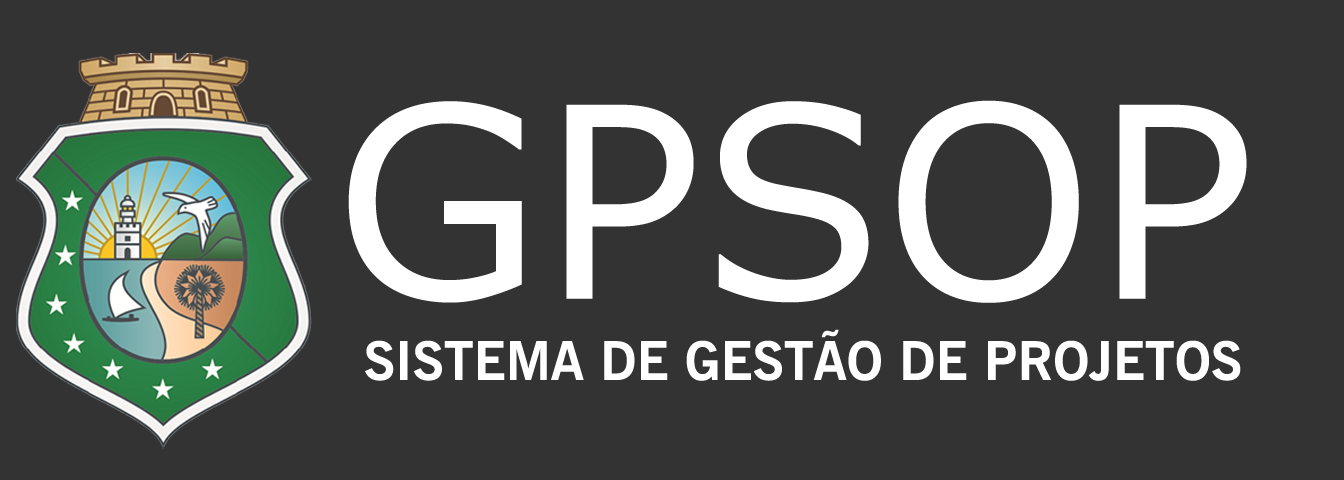
<style>
.page{position:relative;width:1344px;height:480px;background:#333333}
.page>*{position:absolute;margin:0}
.t1{font:266.6px "MSReferenceSansSerif";color:#ffffff}
.t2{font:53.3px "NewsGothicBT-Bold";color:#ffffff}
</style>
<div class="page">
<p class="t1" style="left:348px;top:100px;width:899px;height:203px">GPSOP</p>
<p class="t2" style="left:365px;top:329px;width:876px;height:52px">SISTEMA DE GESTÃO DE PROJETOS</p>
</div>
